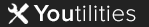
<style>
.page{position:relative;width:149px;height:27px;background:#222222}
.page>*{position:absolute;margin:0}
.t1{font:24px "ProximaNova-Light";letter-spacing:0.02em;color:#ffffff}
.t2{font:24px "ProximaNova-Semibold";letter-spacing:0.02em;color:#ffffff}
</style>
<div class="page">
<p class="t1" style="left:33px;top:5px;width:103px;height:17px"><span class="t2">You</span>tilities</p>
</div>
